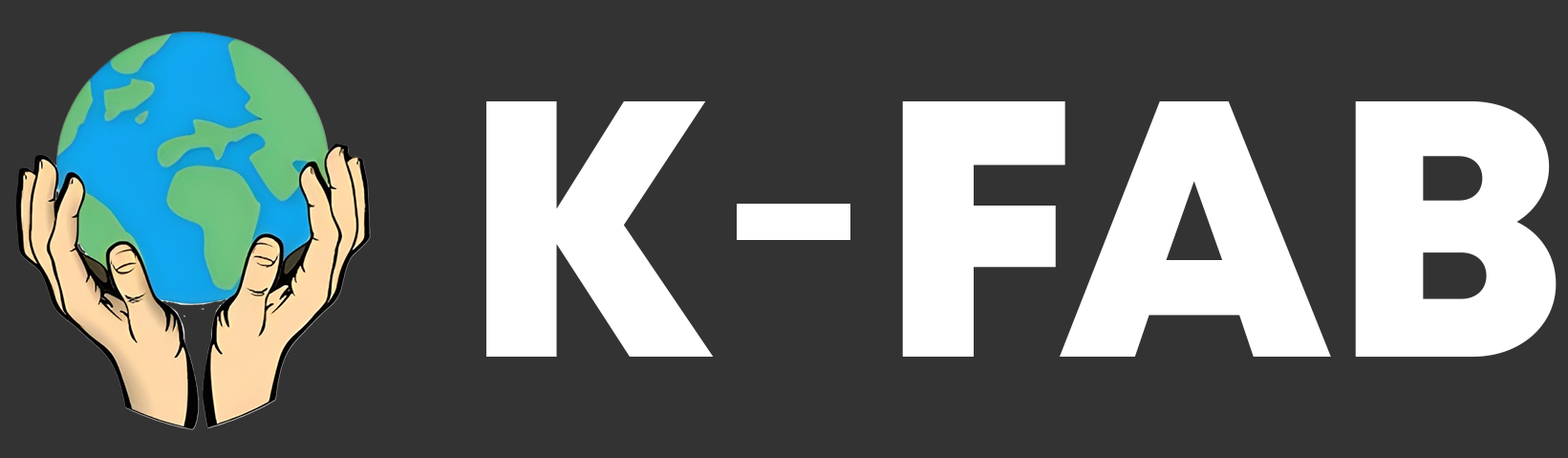
<style>
.page{position:relative;width:1568px;height:458px;background:#333333}
.page>*{position:absolute;margin:0}
.t1{font:364.2px "Mont-HeavyDEMO";color:#ffffff}
.t2{font:364.2px "ADAM.CGPRO";color:#ffffff}
</style>
<div class="page">
<p class="t1" style="left:486px;top:101px;width:1071px;height:256px">K<span class="t2">-</span>FAB</p>
</div>
